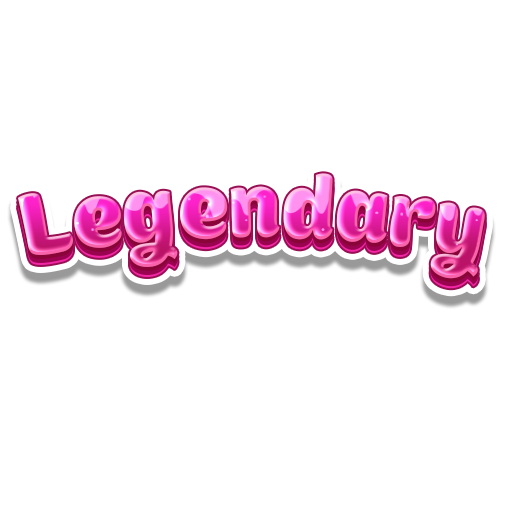
<style>
.page{position:relative;width:512px;height:512px;background:#ffffff}
.page>*{position:absolute;margin:0}
.t1{font:100px "Boomboom"}
</style>
<div class="page">
<p class="t1" style="left:18px;top:173px;width:467px;height:106px">Legendary</p>
</div>
